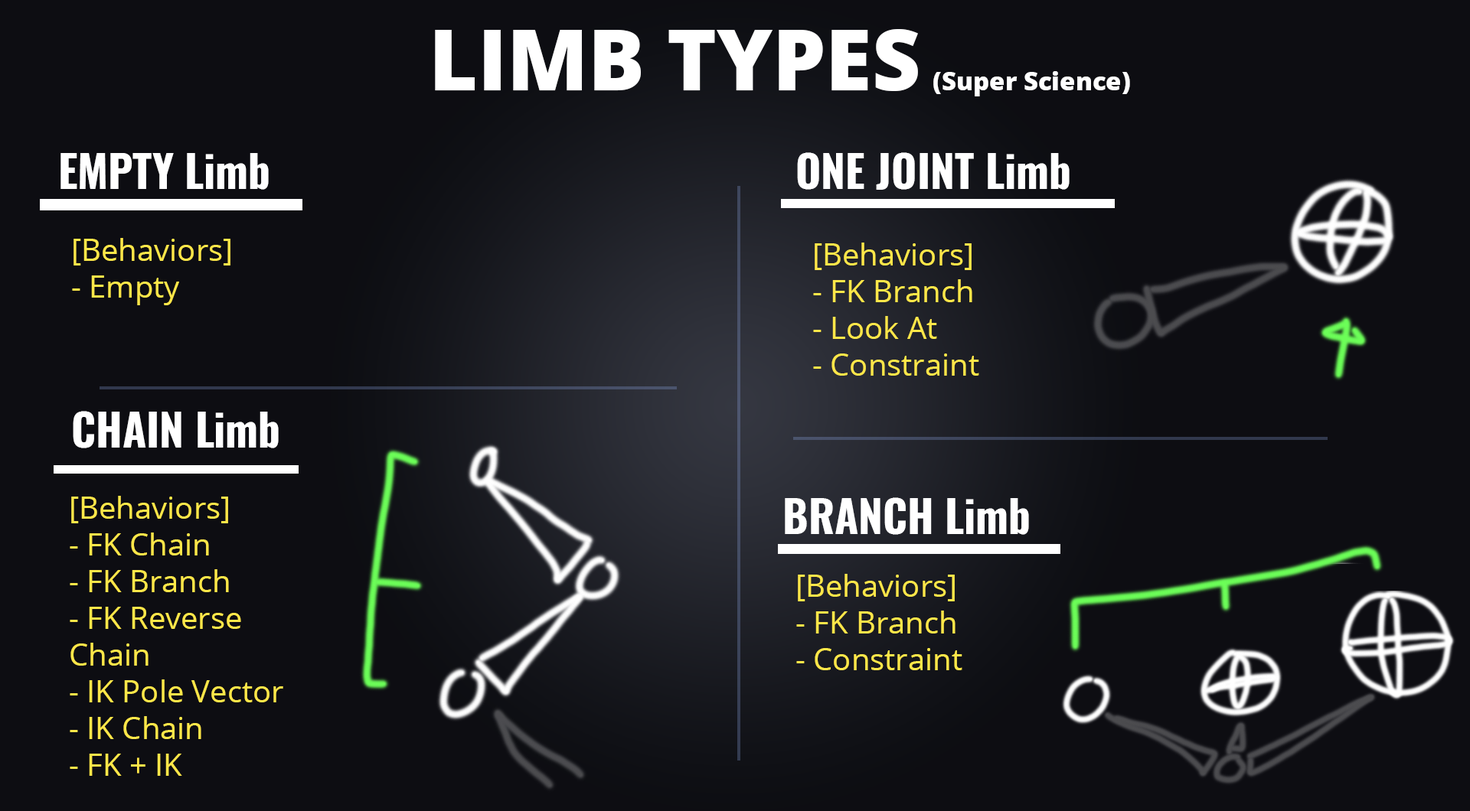
<style>
.page{position:relative;width:1470px;height:811px;background:#0d0d12}
.page>*{position:absolute;margin:0}
.t1{font:25.3px "OpenSans-ExtraBold";color:#ffffff}
.t2{font:84.2px "OpenSans-ExtraBold";color:#ffffff}
.t3{font:43.6px "Oswald-Bold";color:#ffffff}
.t4{font:30.6px "OpenSans-Regular";color:#ffe749}
</style>
<div class="page">
<p class="t1" style="left:435px;top:29px;width:695px;height:67px"><span class="t2">LIMB TYPES </span>(Super Science)</p>
<p class="t3" style="left:60px;top:153px;width:209px;height:37px">EMPTY Limb</p>
<p class="t3" style="left:797px;top:152px;width:272px;height:38px">ONE JOINT Limb</p>
<p class="t4" style="left:72px;top:238px;width:158px;height:67px">[Behaviors]<br>- Empty</p>
<p class="t4" style="left:813px;top:243px;width:166px;height:133px">[Behaviors]<br>- FK Branch<br>- Look At<br>- Constraint</p>
<p class="t3" style="left:73px;top:411px;width:206px;height:38px">CHAIN Limb</p>
<p class="t4" style="left:70px;top:496px;width:213px;height:280px">[Behaviors]<br>- FK Chain<br>- FK Branch<br>- FK Reverse Chain<br>- IK Pole Vector<br>- IK Chain<br>- FK + IK<br>- Constraint</p>
<p class="t3" style="left:785px;top:498px;width:244px;height:37px">BRANCH Limb</p>
<p class="t4" style="left:796px;top:574px;width:166px;height:97px">[Behaviors]<br>- FK Branch<br>- Constraint</p>
</div>
